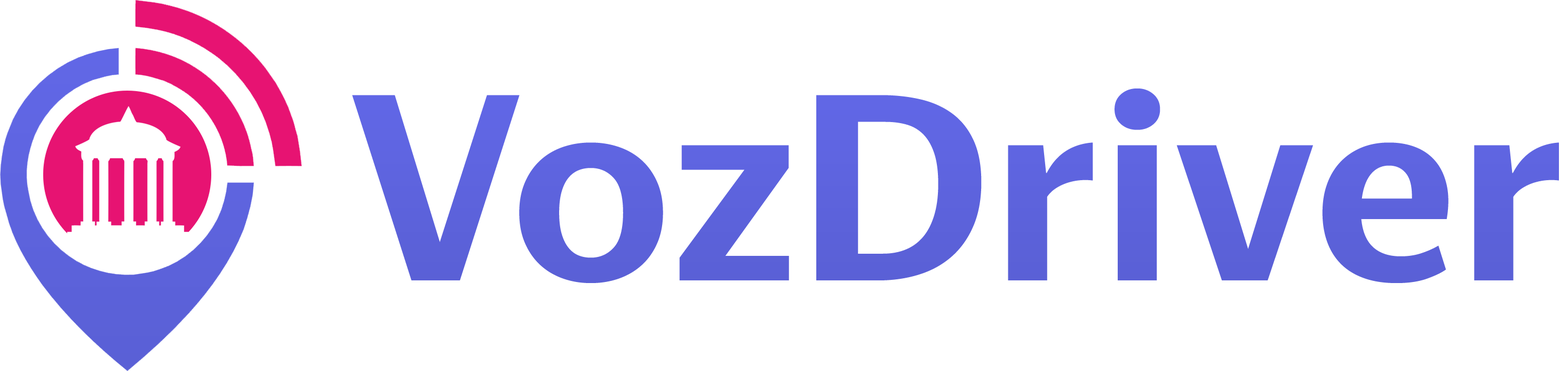
<style>
.page{position:relative;width:1568px;height:371px;background:#ffffff}
.page>*{position:absolute;margin:0}
.t1{font:266.8px "YandexSansDisplay-Bold";color:#5d63dc}
</style>
<div class="page">
<p class="t1" style="left:352px;top:89px;width:1207px;height:194px">VozDriver</p>
</div>
